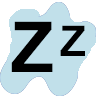
<style>
.page{position:relative;width:96px;height:96px;background:#c1e0ea}
.page>*{position:absolute;margin:0}
.t1{font:120px "Arial-BoldMT";letter-spacing:0.1em;color:#000000;text-transform:uppercase}
.t2{font:72px "Arial-BoldMT";letter-spacing:0.1em;color:#000000;text-transform:uppercase}
</style>
<div class="page">
<p class="t1" style="left:11px;top:21px;width:74px;height:51px">z<span class="t2">Z</span></p>
</div>
